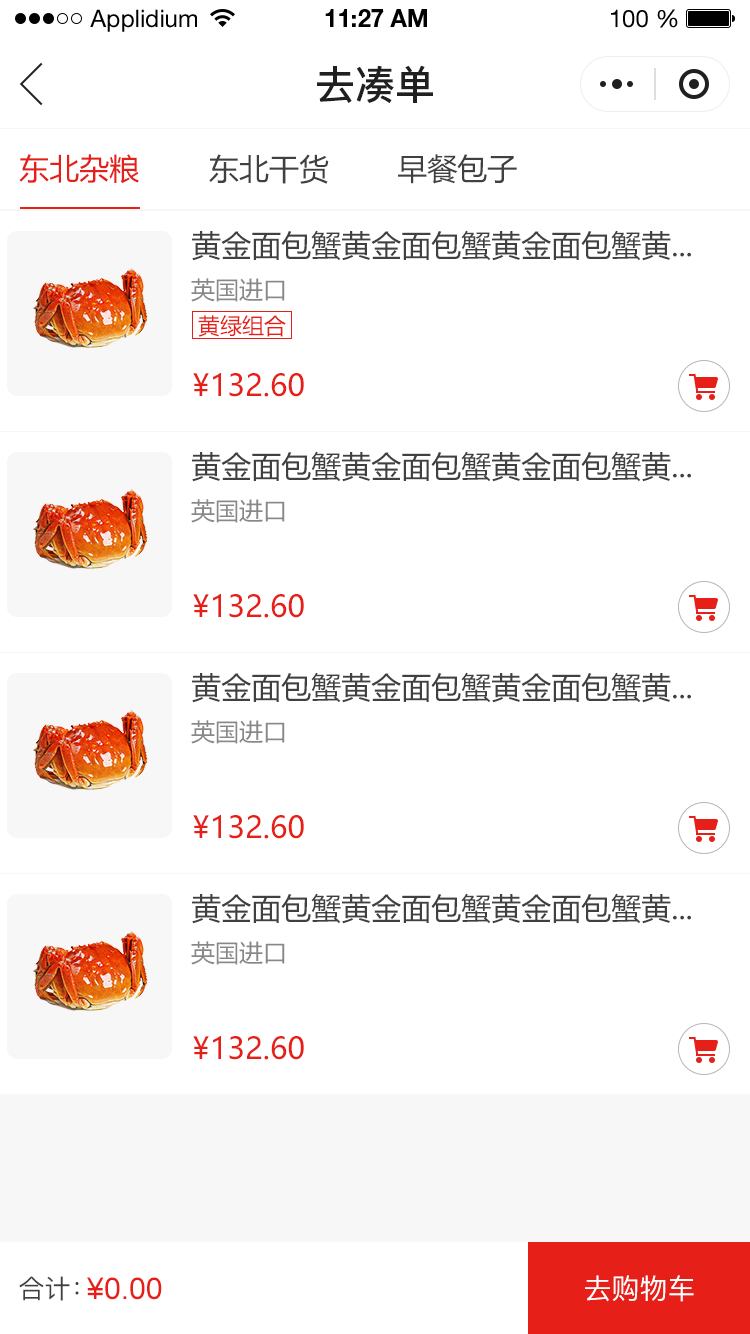
<style>
.page{position:relative;width:750px;height:1334px;background:#ffffff}
.page>*{position:absolute;margin:0}
.t1{font:24px "HelveticaNeueLTStd-Roman";color:#000000}
.t2{font:24px "HelveticaNeueLTStd-Bd";color:#000000}
.t3{font:40px "PingFang-SC-Bold";color:#202020;text-transform:uppercase}
.t4{font:30px "MicrosoftYaHei";color:#e61f18}
.t5{font:30px "MicrosoftYaHei";color:#404040}
.t6{font:30px "MicrosoftYaHei";color:#404040;text-transform:uppercase}
.t7{font:24px "MicrosoftYaHei";color:#888888;text-transform:uppercase}
.t8{font:22px "MicrosoftYaHei";color:#e61f18;text-transform:uppercase}
.t9{font:30px "MicrosoftYaHei";color:#e61f18;text-transform:uppercase}
.t10{font:26px "PingFang-SC-Medium";color:#404040;text-transform:uppercase}
.t11{font:30px "ArialMT";color:#e61f18;text-transform:uppercase}
.t12{font:28px "PingFang-SC-Medium";color:#fffefe;text-transform:uppercase}
</style>
<div class="page">
<p class="t1" style="left:90px;top:9px;width:107px;height:23px">Applidium</p>
<p class="t2" style="left:325px;top:9px;width:102px;height:18px">11:27 AM</p>
<p class="t1" style="left:611px;top:9px;width:67px;height:19px">100 %</p>
<p class="t3" style="left:317px;top:65px;width:116px;height:38px">去凑单</p>
<p class="t4" style="left:19px;top:154px;width:120px;height:30px">东北杂粮</p>
<p class="t5" style="left:209px;top:154px;width:120px;height:30px">东北干货</p>
<p class="t5" style="left:398px;top:154px;width:119px;height:30px">早餐包子</p>
<p class="t6" style="left:192px;top:230px;width:499px;height:31px">黄金面包蟹黄金面包蟹黄金面包蟹黄...</p>
<p class="t7" style="left:191px;top:278px;width:94px;height:24px">英国进口</p>
<p class="t8" style="left:198px;top:315px;width:88px;height:22px">黄绿组合</p>
<p class="t9" style="left:193px;top:373px;width:111px;height:24px">¥132.60</p>
<p class="t6" style="left:192px;top:451px;width:499px;height:31px">黄金面包蟹黄金面包蟹黄金面包蟹黄...</p>
<p class="t7" style="left:191px;top:499px;width:94px;height:24px">英国进口</p>
<p class="t9" style="left:193px;top:594px;width:111px;height:24px">¥132.60</p>
<p class="t6" style="left:192px;top:672px;width:499px;height:31px">黄金面包蟹黄金面包蟹黄金面包蟹黄...</p>
<p class="t7" style="left:191px;top:720px;width:94px;height:24px">英国进口</p>
<p class="t9" style="left:193px;top:815px;width:111px;height:24px">¥132.60</p>
<p class="t6" style="left:192px;top:893px;width:499px;height:31px">黄金面包蟹黄金面包蟹黄金面包蟹黄...</p>
<p class="t7" style="left:191px;top:941px;width:94px;height:24px">英国进口</p>
<p class="t9" style="left:193px;top:1036px;width:111px;height:24px">¥132.60</p>
<p class="t10" style="left:19px;top:1276px;width:60px;height:25px">合计：</p>
<p class="t11" style="left:87px;top:1277px;width:75px;height:23px">¥0.00</p>
<p class="t12" style="left:585px;top:1275px;width:109px;height:27px">去购物车</p>
</div>
